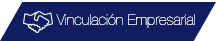
<style>
.page{position:relative;width:216px;height:41px;background:#111d61}
.page>*{position:absolute;margin:0}
.t1{font:14.9px "HelveticaNeue-UltraLight";color:#ffffff}
</style>
<div class="page">
<p class="t1" style="left:56px;top:14px;width:139px;height:14px">Vinculación Empresarial</p>
</div>
